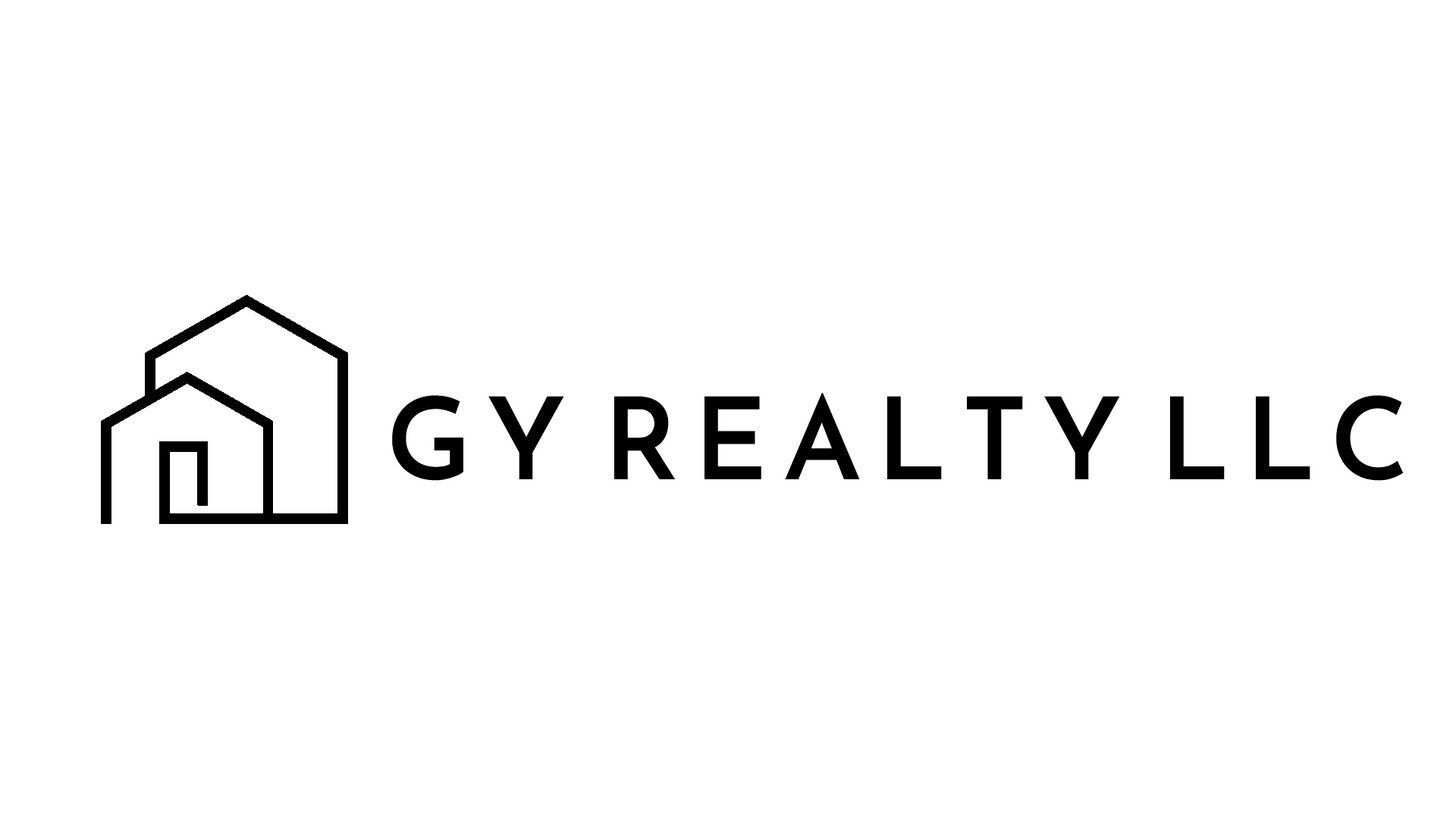
<style>
.page{position:relative;width:1456px;height:819px;background:#ffffff}
.page>*{position:absolute;margin:0}
.t1{font:113.7px "JosefinSans-SemiBold";color:#000000}
</style>
<div class="page">
<p class="t1" style="left:392px;top:393px;width:1011px;height:88px">G Y R E A L T Y L L C</p>
</div>
